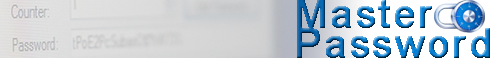
<style>
.page{position:relative;width:493px;height:58px}
.page>*{position:absolute;margin:0}
.t1{font:40px/30px "ArialMT";letter-spacing:0.06em;font-weight:bold}
</style>
<div class="page">
<p class="t1" style="left:297px;top:0px;width:193px;height:58px">Master<br>Password</p>
</div>
